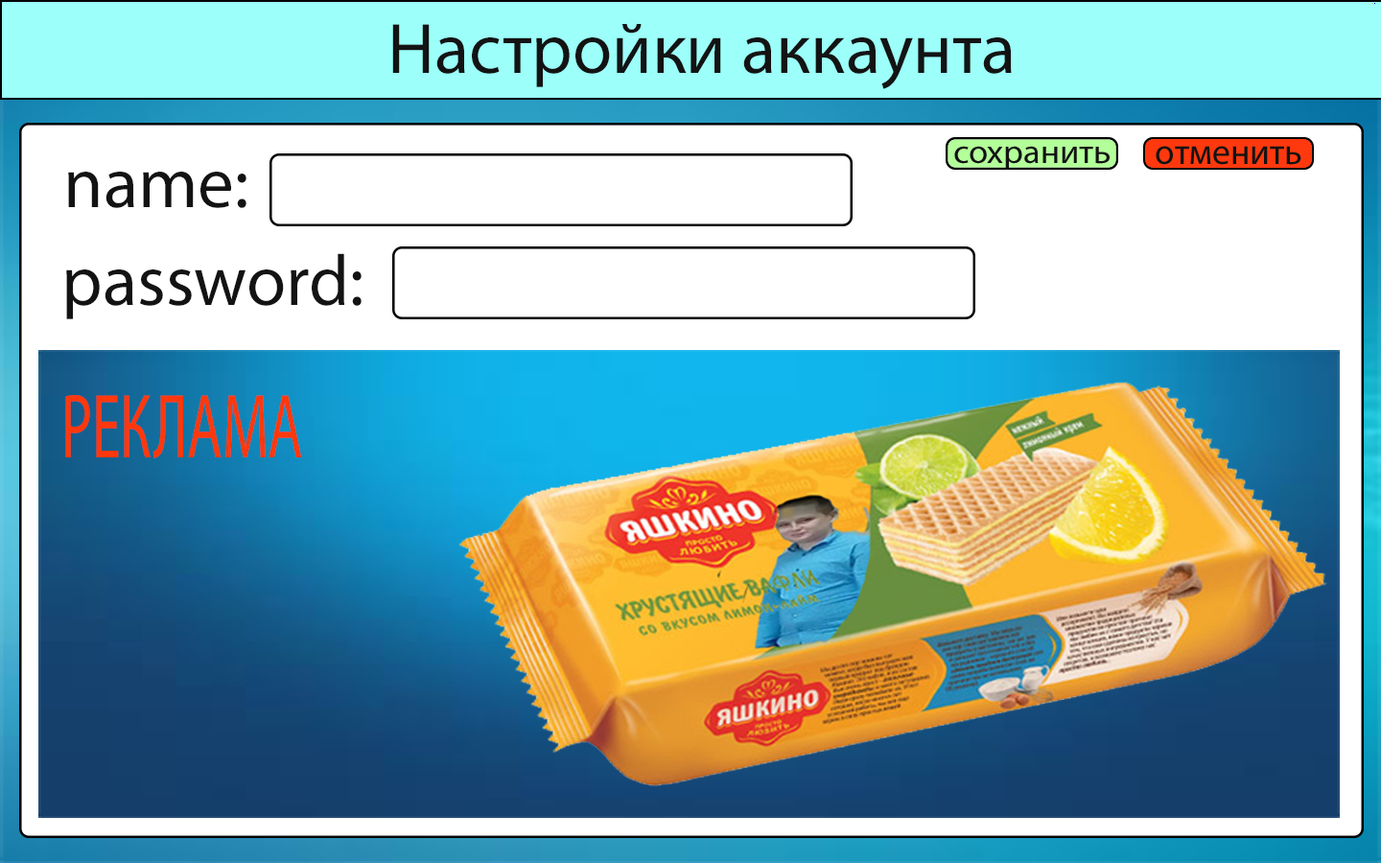
<style>
.page{position:relative;width:1381px;height:863px;background:#ffffff}
.page>*{position:absolute;margin:0}
.t1{font:71.9px "MyriadPro-Regular";color:#131314}
.t2{font:91.8px "MyriadPro-Regular";color:#ff380c;scale:0.62 1}
</style>
<div class="page">
<p class="t1" style="left:392px;top:24px;width:620px;height:65px">Настройки аккаунта</p>
<p class="t1" style="left:68px;top:172px;width:179px;height:36px">name:</p>
<p class="t1" style="left:66px;top:253px;width:296px;height:66px">password:</p>
<p class="t2" style="left:65px;top:395px;width:237px;height:64px">РЕКЛАМА</p>
</div>
